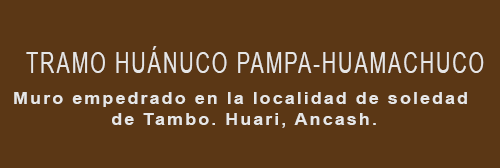
<style>
.page{position:relative;width:500px;height:168px;background:#5b3715}
.page>*{position:absolute;margin:0}
.t1{font:28.6px "ArialMT";letter-spacing:0.1em;color:#e6e6e6;scale:0.69 1}
.t2{font:16.8px "Arial-BoldMT";letter-spacing:0.1em;color:#e6e6e6;scale:1.09 1}
</style>
<div class="page">
<p class="t1" style="left:26px;top:46px;width:458px;height:27px">TRAMO HUÁNUCO PAMPA-HUAMACHUCO</p>
<p class="t2" style="left:14px;top:92px;width:453px;height:36px;text-align:center">Muro empedrado en la localidad de soledad <br>de Tambo. Huari, Ancash.</p>
</div>
